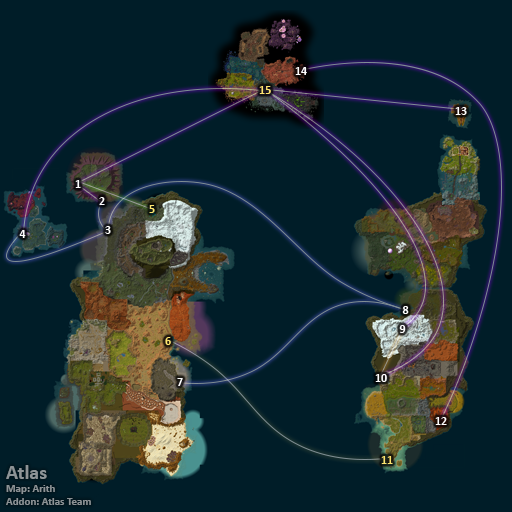
<style>
.page{position:relative;width:512px;height:512px;background:#001d28}
.page>*{position:absolute;margin:0}
.t1{font:12px "Calibri-Bold";color:#ffffff}
.t2{font:12px "Calibri-Bold";color:#fee570}
.t3{font:11px "Calibri-Bold";color:#8d9396}
.t4{font:20px "Calibri-Bold";color:#8d9396}
</style>
<div class="page">
<p class="t1" style="left:295px;top:67px;width:12px;height:8px">14</p>
<p class="t2" style="left:259px;top:86px;width:12px;height:8px">15</p>
<p class="t1" style="left:455px;top:107px;width:12px;height:8px">13</p>
<p class="t1" style="left:75px;top:180px;width:6px;height:8px">1</p>
<p class="t1" style="left:99px;top:197px;width:6px;height:8px">2</p>
<p class="t2" style="left:149px;top:205px;width:6px;height:8px">5</p>
<p class="t1" style="left:19px;top:230px;width:7px;height:8px">4</p>
<p class="t1" style="left:105px;top:226px;width:6px;height:8px">3</p>
<p class="t1" style="left:402px;top:306px;width:7px;height:8px">8</p>
<p class="t1" style="left:399px;top:325px;width:7px;height:8px">9</p>
<p class="t2" style="left:165px;top:337px;width:6px;height:8px">6</p>
<p class="t1" style="left:375px;top:374px;width:12px;height:8px">10</p>
<p class="t1" style="left:177px;top:378px;width:6px;height:8px">7</p>
<p class="t1" style="left:435px;top:417px;width:12px;height:8px">12</p>
<p class="t2" style="left:381px;top:456px;width:12px;height:8px">11</p>
<p class="t3" style="left:6px;top:465px;width:85px;height:40px"><span class="t4">Atlas<br></span>Map: Arith<br>Addon: Atlas Team</p>
</div>
